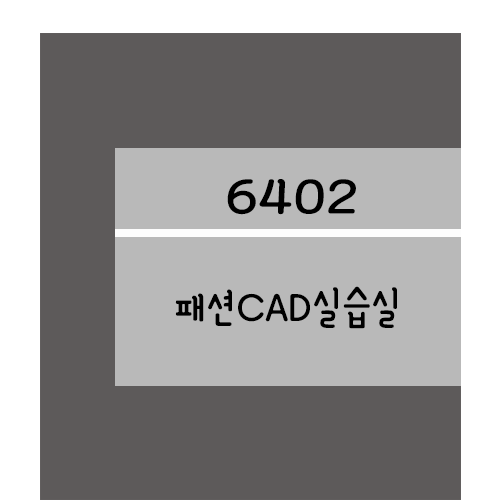
<style>
.page{position:relative;width:500px;height:500px;background:#5d5a5a}
.page>*{position:absolute;margin:0}
.t1{font:61.2px "YanoljaYacheR";color:#000000;scale:1.18 1}
.t2{font:48px "YanoljaYacheR";color:#000000}
</style>
<div class="page">
<p class="t1" style="left:227px;top:179px;width:129px;height:36px">6402</p>
<p class="t2" style="left:175px;top:286px;width:222px;height:43px">패션CAD실습실</p>
</div>
